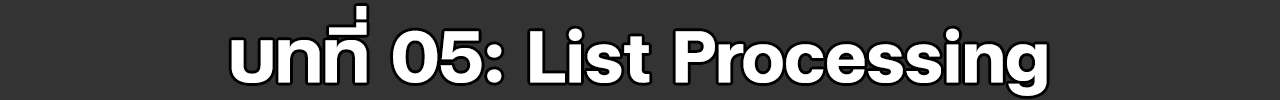
<style>
.page{position:relative;width:1280px;height:100px;background:#333333}
.page>*{position:absolute;margin:0}
.t1{font:100px "FCMinimalBold";color:#ffffff}
</style>
<div class="page">
<p class="t1" style="left:231px;top:6px;width:816px;height:90px">บทที่ 05: List Processing</p>
</div>
